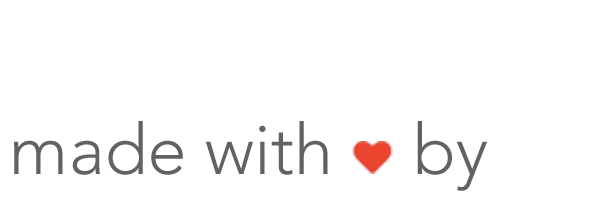
<style>
.page{position:relative;width:600px;height:200px;background:#ffffff}
.page>*{position:absolute;margin:0}
.t1{font:70px "Avenir-Light";color:#626262}
</style>
<div class="page">
<p class="t1" style="left:14px;top:121px;width:314px;height:54px">made with</p>
<p class="t1" style="left:417px;top:121px;width:70px;height:70px">by</p>
</div>
